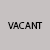
<style>
.page{position:relative;width:50px;height:50px;background:#c6c1c1}
.page>*{position:absolute;margin:0}
.t1{font:10px "MyriadPro-Regular";color:#050505}
</style>
<div class="page">
<p class="t1" style="left:8px;top:22px;width:35px;height:7px">VACANT</p>
</div>
